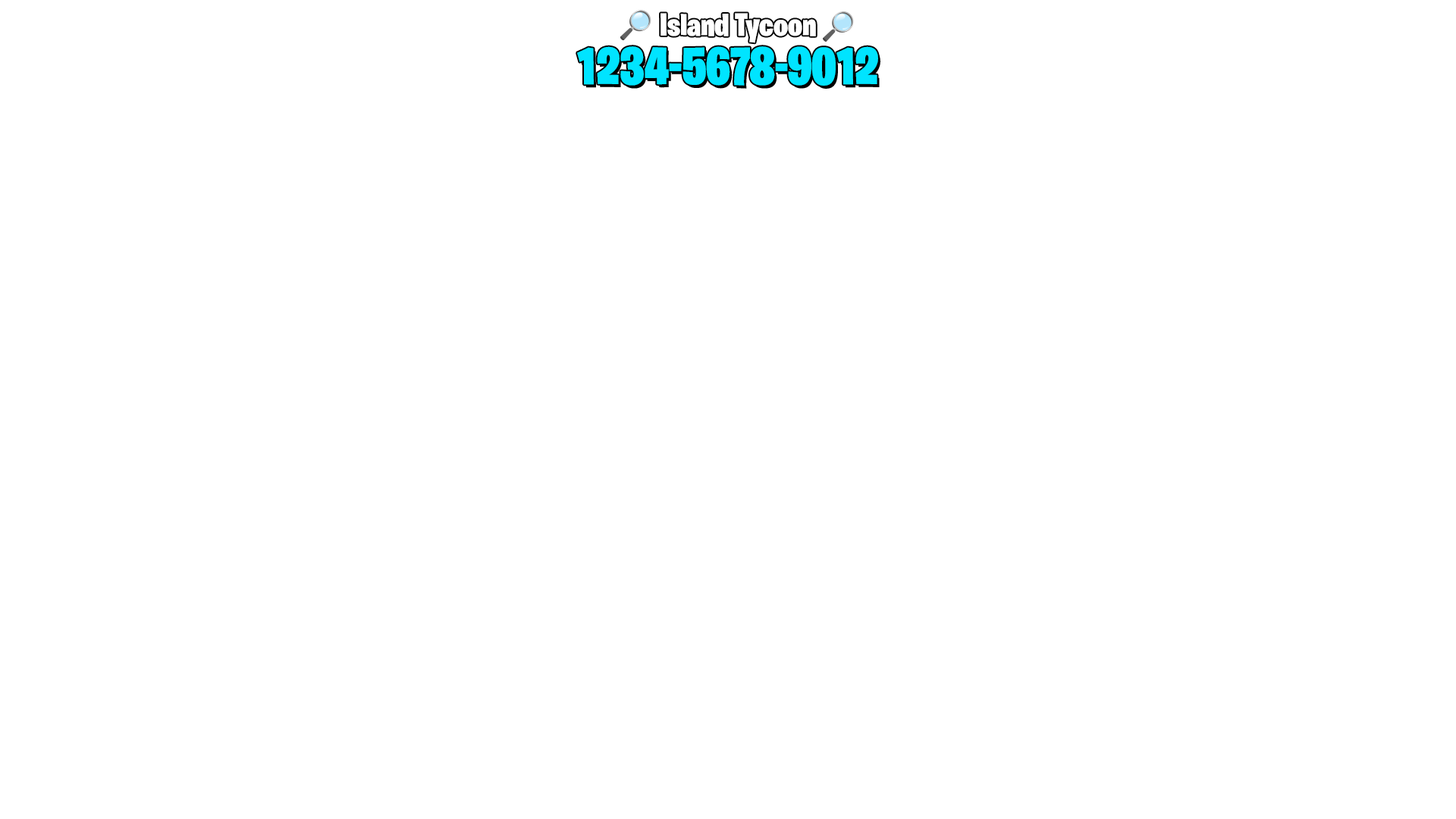
<style>
.page{position:relative;width:1456px;height:819px;background:#ffffff}
.page>*{position:absolute;margin:0}
.t1{font:32.1px "BurbankBigCondensed-Black";color:#ffffff}
.t2{font:52.7px "BurbankBigCondensed-Black";color:#00e4ff}
</style>
<div class="page">
<p class="t1" style="left:660px;top:13px;width:156px;height:30px">Island Tycoon</p>
<p class="t2" style="left:577px;top:46px;width:301px;height:40px">1234-5678-9012</p>
</div>
